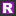
<style>
.page{position:relative;width:16px;height:16px;background:#333333}
.page>*{position:absolute;margin:0}
.t1{font:14px "Arial-Black";letter-spacing:-0.06em;color:#ffffff}
</style>
<div class="page">
<p class="t1" style="left:3px;top:3px;width:10px;height:10px">R</p>
</div>
